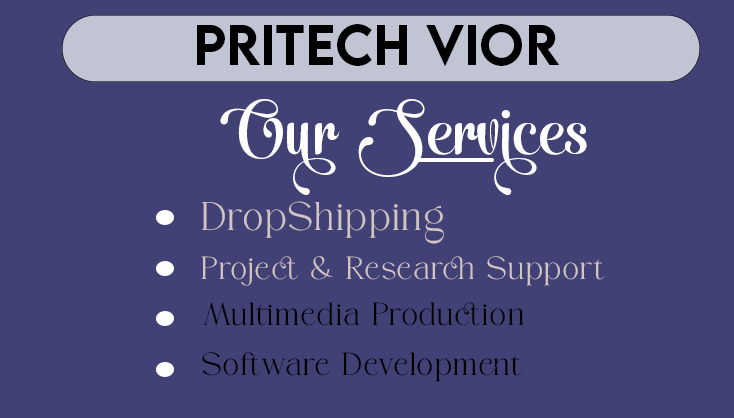
<style>
.page{position:relative;width:734px;height:418px;background:#414175}
.page>*{position:absolute;margin:0}
.t1{font:51px "LEMONMILK-Medium";color:#000000}
.t2{font:51px "SantioleSwashPERSONALUSE-Regular";color:#ffffff}
.t3{font:40px "BravenRegular";color:#d1c4c4}
.t4{font:32px "BravenRegular";color:#d1c4c4}
.t5{font:32px "BravenRegular";color:#000000}
</style>
<div class="page">
<p class="t1" style="left:197px;top:24px;width:363px;height:43px">PRITECH VIOR</p>
<p class="t2" style="left:220px;top:99px;width:367px;height:96px">Our  Services</p>
<p class="t3" style="left:201px;top:201px;width:243px;height:43px">DropShipping</p>
<p class="t4" style="left:201px;top:256px;width:404px;height:30px">Project &amp; Research Support</p>
<p class="t5" style="left:203px;top:302px;width:321px;height:24px">Multimedia Production</p>
<p class="t5" style="left:202px;top:352px;width:320px;height:30px">Software Development</p>
</div>
